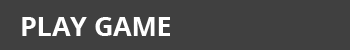
<style>
.page{position:relative;width:350px;height:50px;background:#404040}
.page>*{position:absolute;margin:0}
.t1{font:26.7px "OpenSans-Bold";color:#ffffff}
</style>
<div class="page">
<p class="t1" style="left:22px;top:17px;width:148px;height:19px">PLAY GAME</p>
</div>
